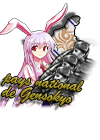
<style>
.page{position:relative;width:100px;height:140px;background:#ffffff}
.page>*{position:absolute;margin:0}
.t1{font:17.9px/13.3px "BrushScriptMT"}
</style>
<div class="page">
<p class="t1" style="left:1px;top:74px;width:83px;height:33px;rotate:7deg">pays national<br>de Gensokyo</p>
</div>
